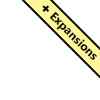
<style>
.page{position:relative;width:100px;height:100px;background:#ffffff}
.page>*{position:absolute;margin:0}
.t1{font:14px "Arial-Black";color:#000000}
.t2{font:12px "SegoeUI-Bold";color:#000000}
.t3{font:12px "Arial-Black";color:#000000}
</style>
<div class="page">
<p class="t1" style="left:42px;top:5px;width:8px;height:7px;rotate:45deg">+</p>
<p class="t2" style="left:49px;top:11px;width:48px;height:49px;rotate:45deg"><span class="t3">  </span> Expansions</p>
</div>
